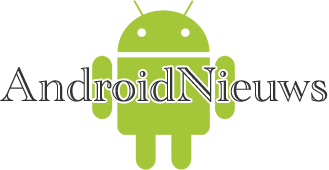
<style>
.page{position:relative;width:329px;height:170px;background:#ffffff}
.page>*{position:absolute;margin:0}
.t1{font:50px "AcademyEngravedLetPlain";color:#333333}
</style>
<div class="page">
<p class="t1" style="left:0px;top:67px;width:328px;height:35px">AndroidNieuws</p>
</div>
